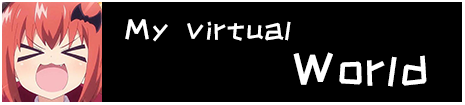
<style>
.page{position:relative;width:465px;height:105px;background:#000000}
.page>*{position:absolute;margin:0}
.t1{font:30px "HappyZcool-2016";letter-spacing:0.075em;color:#ffffff}
.t2{font:30px "HappyZcool-2016";letter-spacing:0.075em;color:#ffffff;text-transform:uppercase;font-weight:bold}
.t3{font:48px "HappyZcool-2016";letter-spacing:0.075em;color:#ffffff}
.t4{font:48px "HappyZcool-2016";letter-spacing:0.075em;color:#ffffff;text-transform:uppercase;font-weight:bold}
</style>
<div class="page">
<p class="t1" style="left:125px;top:19px;width:166px;height:23px"><span class="t2">M</span>y virtual</p>
<p class="t3" style="left:293px;top:52px;width:134px;height:35px"><span class="t4">W</span>orld</p>
</div>
